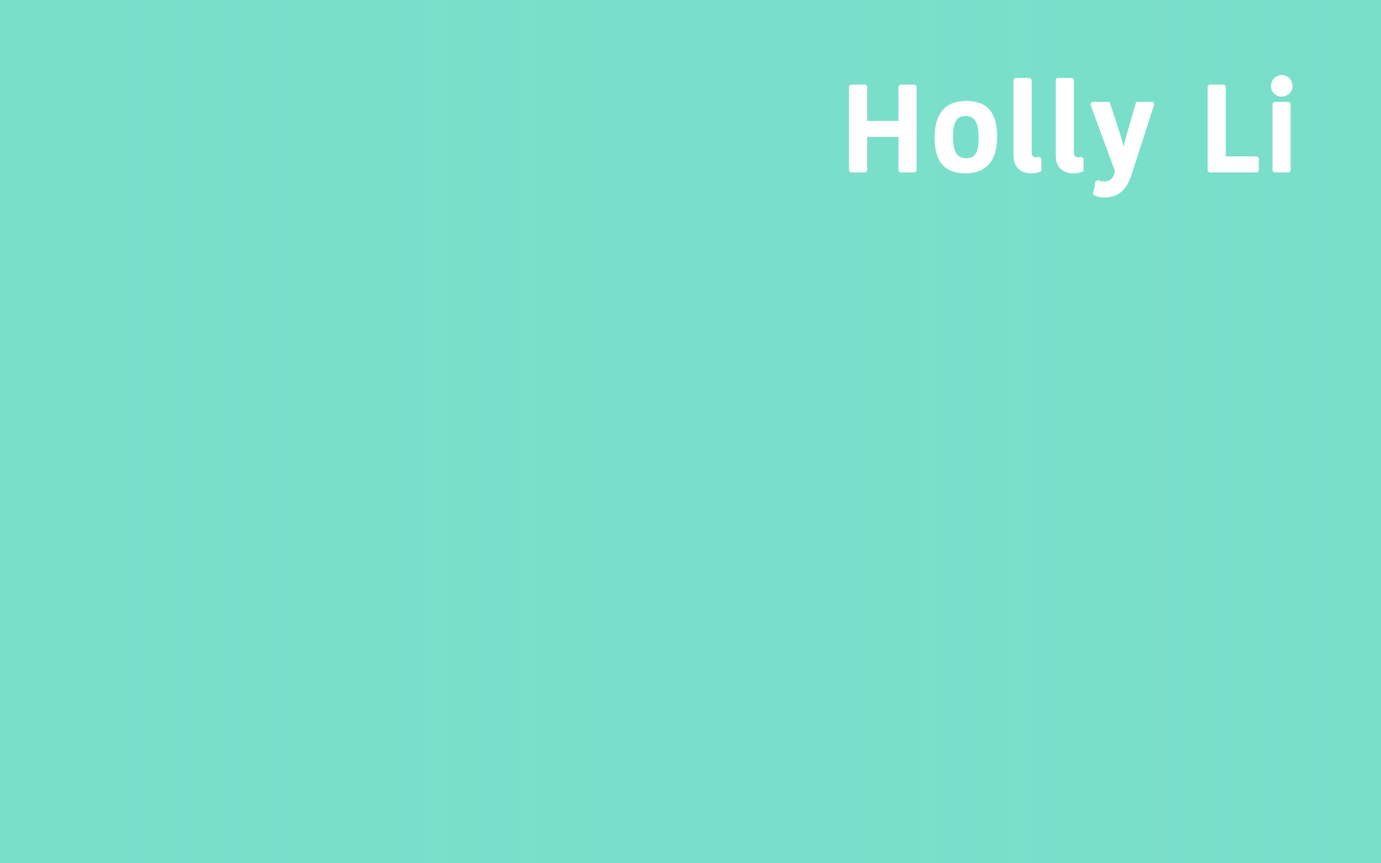
<style>
.page{position:relative;width:1381px;height:863px;background:#7adfca}
.page>*{position:absolute;margin:0}
.t1{font:119.9px "KohinoorDevanagari-Medium";letter-spacing:0.02em;color:#ffffff;font-weight:bold}
</style>
<div class="page">
<p class="t1" style="left:849px;top:75px;width:444px;height:123px">Holly Li</p>
</div>
